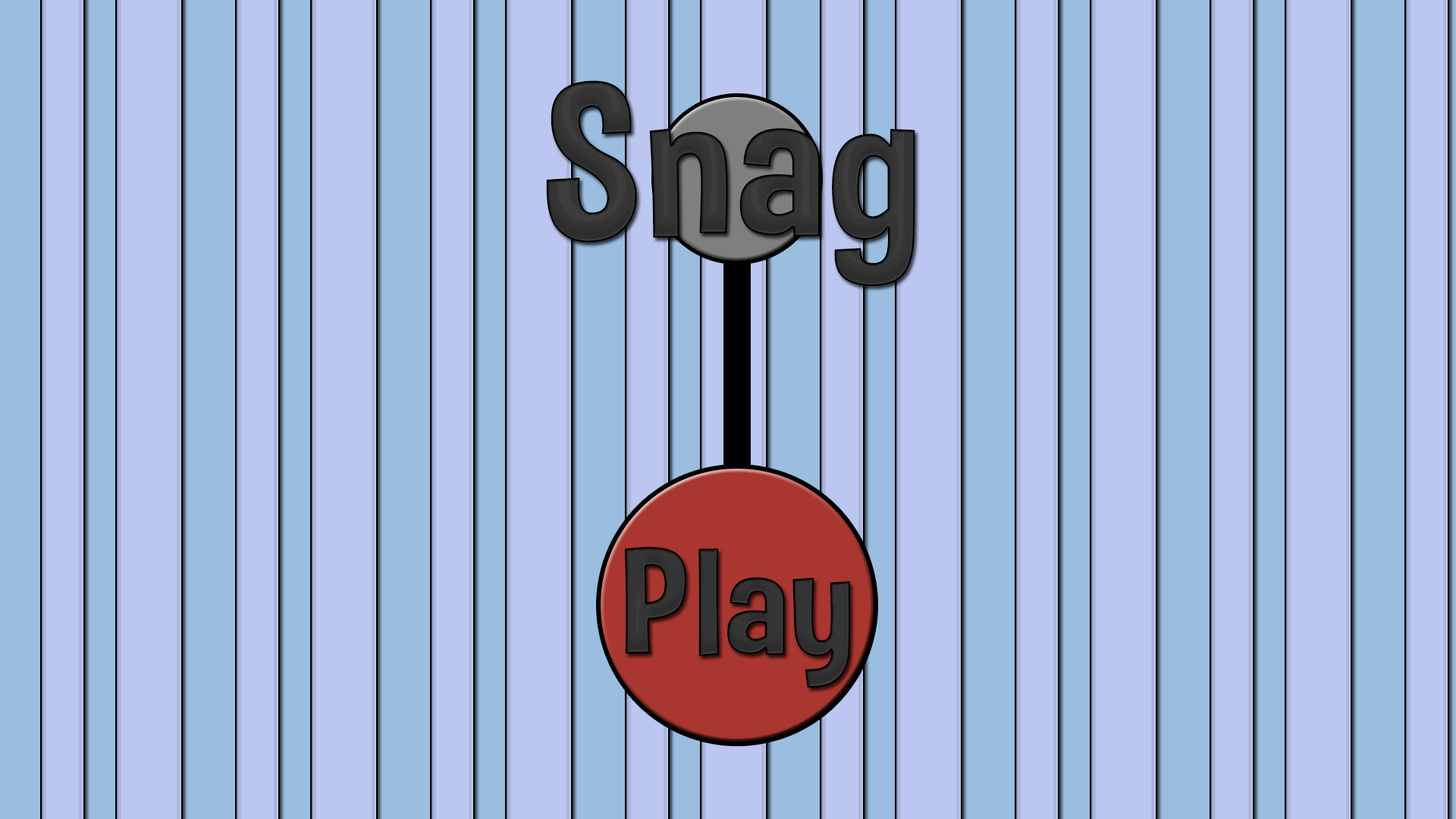
<style>
.page{position:relative;width:1456px;height:819px;background:#bbc7f0}
.page>*{position:absolute;margin:0}
.t1{font:211.7px "DimboRegular";letter-spacing:0.015em;color:#343434;scale:1.07 1}
.t2{font:151.7px "DimboRegular";letter-spacing:0.015em;color:#333333;scale:1.07 1}
</style>
<div class="page">
<p class="t1" style="left:546px;top:80px;width:369px;height:206px">Snag</p>
<p class="t2" style="left:625px;top:547px;width:225px;height:141px">Play</p>
</div>
